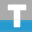
<style>
.page{position:relative;width:32px;height:32px;background:#acabab}
.page>*{position:absolute;margin:0}
.t1{font:30px "AvenirNextLTPro-Bold";color:#ffffff;font-weight:bold}
</style>
<div class="page">
<p class="t1" style="left:7px;top:4px;width:20px;height:24px">T</p>
</div>
